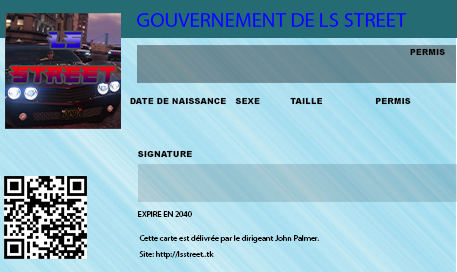
<style>
.page{position:relative;width:457px;height:272px}
.page>*{position:absolute;margin:0}
.t1{font:20.8px "MyriadPro-Regular";color:#0c00ff}
.t2{font:8.3px "Arial-Black";color:#010101}
.t3{font:8.3px "MyriadPro-Regular";color:#000000}
</style>
<div class="page">
<p class="t1" style="left:137px;top:13px;width:270px;height:14px">GOUVERNEMENT DE LS STREET</p>
<p class="t2" style="left:410px;top:48px;width:35px;height:8px">PERMIS</p>
<p class="t2" style="left:130px;top:97px;width:96px;height:8px">DATE DE NAISSANCE</p>
<p class="t2" style="left:235px;top:97px;width:25px;height:8px">SEXE</p>
<p class="t2" style="left:290px;top:97px;width:33px;height:8px">TAILLE</p>
<p class="t2" style="left:375px;top:97px;width:36px;height:8px">PERMIS</p>
<p class="t2" style="left:138px;top:150px;width:54px;height:8px">SIGNATURE</p>
<p class="t3" style="left:138px;top:211px;width:54px;height:6px">EXPIRE EN 2040</p>
<p class="t3" style="left:139px;top:235px;width:180px;height:8px">Cette carte est délivrée par le dirigeant John Palmer.</p>
<p class="t3" style="left:139px;top:251px;width:75px;height:8px">Site: http://lsstreet..tk</p>
</div>
